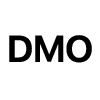
<style>
.page{position:relative;width:100px;height:100px;background:#ffffff}
.page>*{position:absolute;margin:0}
.t1{font:37.5px "SFProDisplay-Bold";color:#000000}
</style>
<div class="page">
<p class="t1" style="left:9px;top:35px;width:83px;height:28px">DMO</p>
</div>
